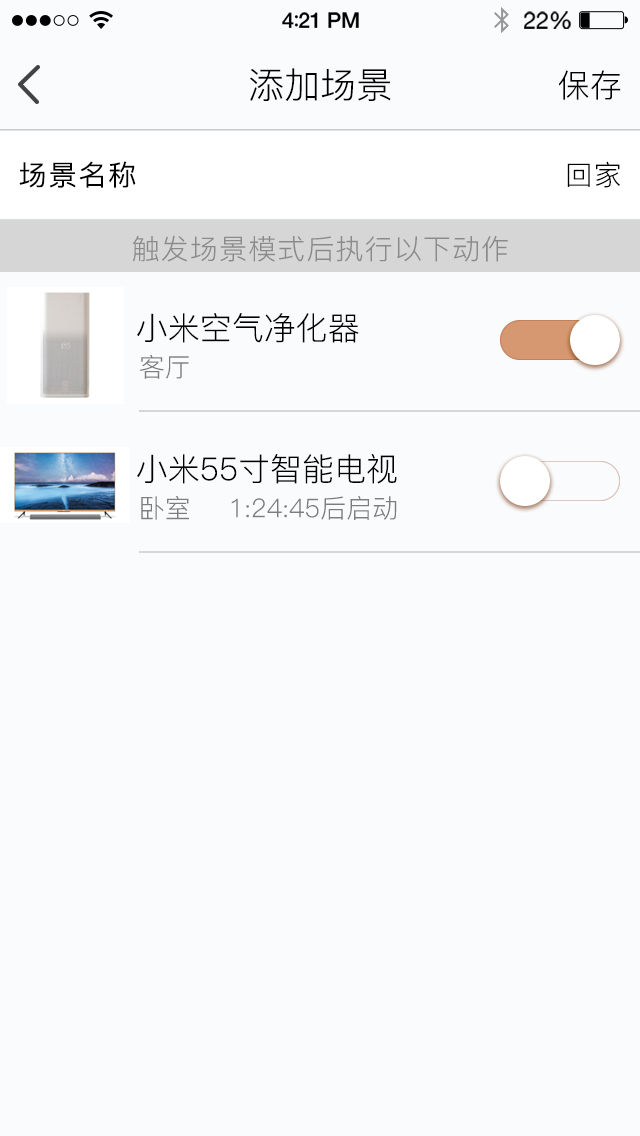
<style>
.page{position:relative;width:640px;height:1136px;background:#fafbfd}
.page>*{position:absolute;margin:0}
.t1{font:36px "PingFang-SC-Regular";color:#000000}
.t2{font:32px "PingFang-SC-Regular";color:#000000}
.t3{font:28px "PingFang-SC-Regular";letter-spacing:0.04em;color:#000000;font-weight:bold}
.t4{font:28px "PingFang-SC-Regular";letter-spacing:0.04em;color:#000000}
.t5{font:28px "PingFang-SC-Regular";letter-spacing:0.04em;color:#8a8a8a}
.t6{font:26px "PingFang-SC-Regular";color:#7d7d7d}
</style>
<div class="page">
<p class="t1" style="left:250px;top:68px;width:141px;height:33px">添加场景</p>
<p class="t2" style="left:558px;top:70px;width:63px;height:30px">保存</p>
<p class="t3" style="left:19px;top:161px;width:117px;height:27px">场景名称</p>
<p class="t4" style="left:567px;top:161px;width:53px;height:27px">回家</p>
<p class="t5" style="left:132px;top:235px;width:376px;height:27px">触发场景模式后执行以下动作</p>
<p class="t2" style="left:137px;top:313px;width:222px;height:30px">小米空气净化器</p>
<p class="t6" style="left:140px;top:355px;width:49px;height:24px">客厅</p>
<p class="t2" style="left:137px;top:454px;width:260px;height:30px">小米55寸智能电视</p>
<p class="t6" style="left:141px;top:495px;width:48px;height:25px">卧室</p>
<p class="t6" style="left:231px;top:495px;width:166px;height:25px">1:24:45后启动</p>
</div>
